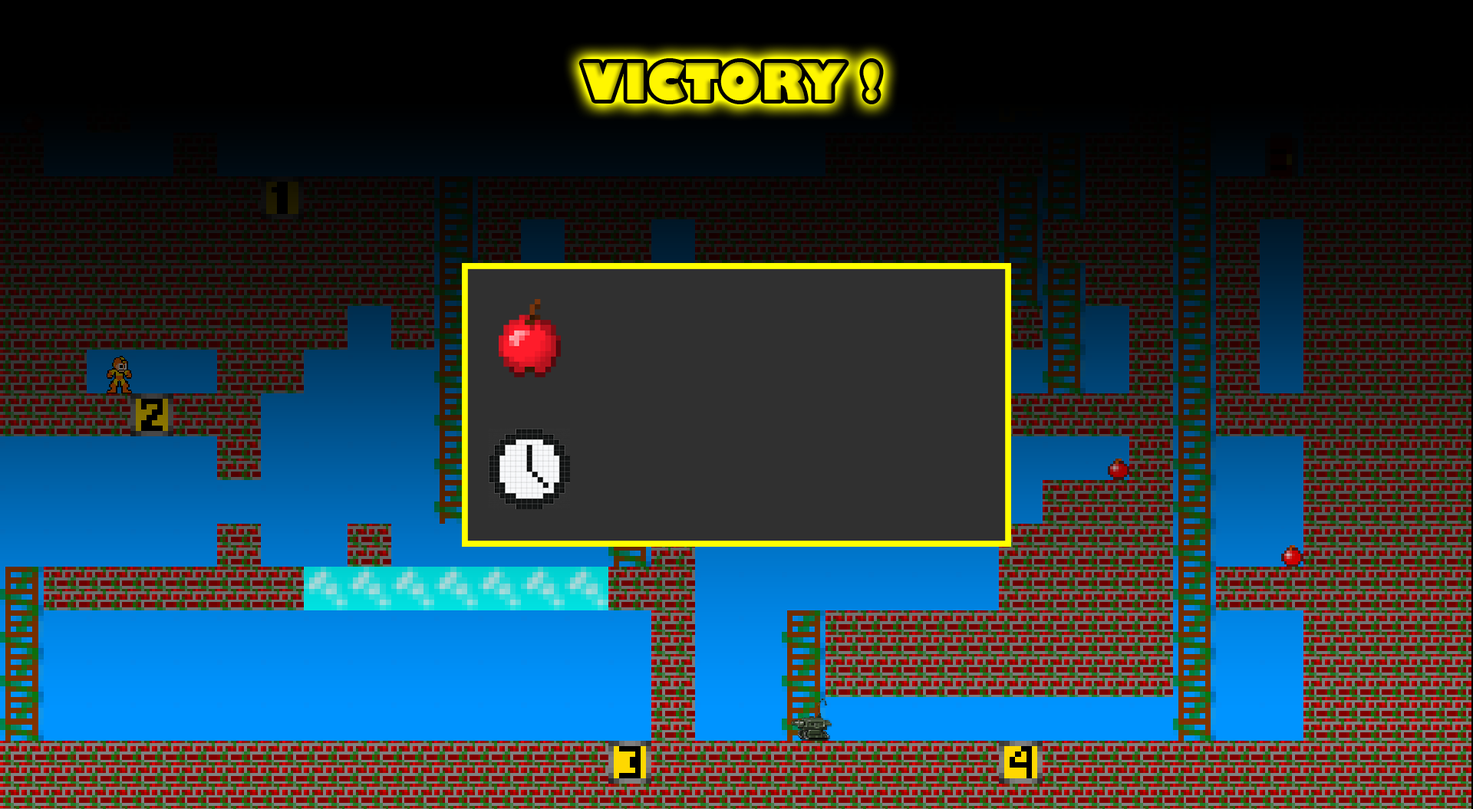
<style>
.page{position:relative;width:1473px;height:809px}
.page>*{position:absolute;margin:0}
.t1{font:49.1px "GillSans-UltraBold";color:#fff600}
.t2{font:61.4px "EngraversMT";color:#000000}
</style>
<div class="page">
<p class="t1" style="left:582px;top:62px;width:298px;height:39px"><span class="t2">                      </span>VICTORY !</p>
</div>
